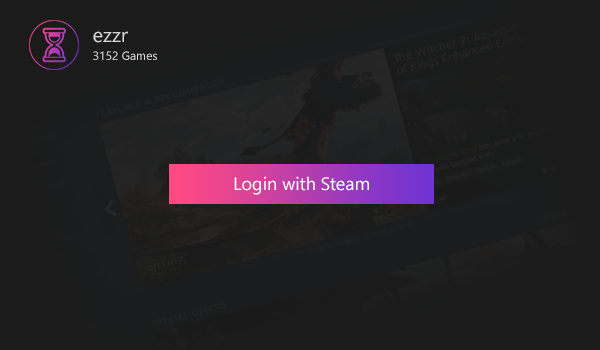
<style>
.page{position:relative;width:600px;height:350px;background:#1b1b1b}
.page>*{position:absolute;margin:0}
.t1{font:12px/18px "SegoeUI";color:#d4d4d4}
.t2{font:20px/18px "SegoeUI";color:#d4d4d4}
.t3{font:18px "SegoeUI";color:#ffffff}
</style>
<div class="page">
<p class="t1" style="left:93px;top:31px;width:64px;height:29px"><span class="t2">ezzr<br></span>3152 Games</p>
<p class="t3" style="left:234px;top:176px;width:135px;height:19px">Login with Steam</p>
</div>
